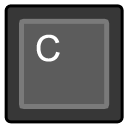
<style>
.page{position:relative;width:128px;height:128px;background:#5c5c5c}
.page>*{position:absolute;margin:0}
.t1{font:36px "ArialMT";color:#ffffff}
</style>
<div class="page">
<p class="t1" style="left:36px;top:34px;width:24px;height:28px">C</p>
</div>
